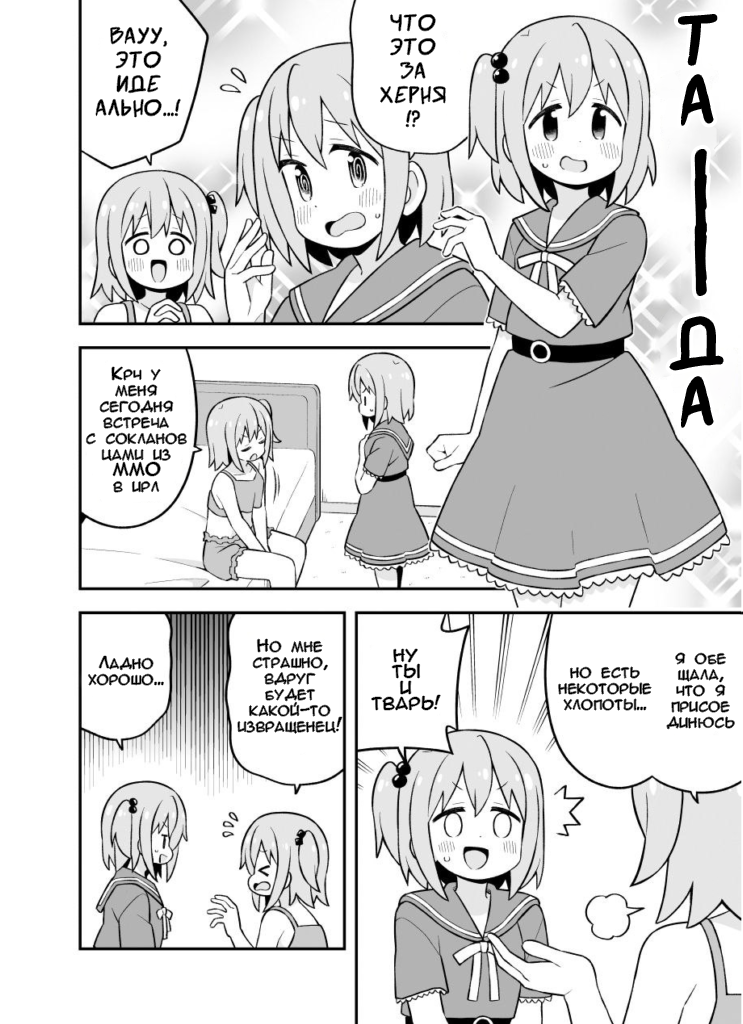
<style>
.page{position:relative;width:743px;height:1024px;background:#ffffff}
.page>*{position:absolute;margin:0}
.t1{font:24px/24px "SuperWebcomicBros.Rusbyyakustick";color:#000000}
.t2{font:72px/12px "AnimeAcev3";color:#000000}
.t3{font:72px/60px "SuperWebcomicBros.Rusbyyakustick";color:#000000}
.t4{font:14px/14px "AnimeAcev3";color:#000000}
.t5{font:24px/12px "AnimeAcev3";color:#000000}
.t6{font:16px/16px "AnimeAcev3";color:#000000}
</style>
<div class="page">
<p class="t1" style="left:380px;top:14px;width:66px;height:113px;text-align:center">Что<br>это<br>за<br>херня<br>!?</p>
<p class="t2" style="left:670px;top:15px;width:53px;height:412px;text-align:center"><span class="t3">Т<br>А<br><br></span><span class="t4"><br></span>|<br> <br>|<br> <br><br><br>|<br>|<span class="t5"><br><br></span><span class="t3">д<br>А</span></p>
<p class="t1" style="left:96px;top:27px;width:85px;height:90px;text-align:center">Вауу,<br>это<br>иде<br>ально...!</p>
<p class="t6" style="left:86px;top:367px;width:101px;height:126px;text-align:center">Крч у<br>меня<br>сегодня<br>встреча<br>с сокланов<br>цами из<br>MMO<br>в ирл</p>
<p class="t6" style="left:237px;top:639px;width:105px;height:95px;text-align:center">Но мне<br>страшно,<br>вдруг<br>будет<br>какой-то<br>извращенец!</p>
<p class="t6" style="left:371px;top:649px;width:70px;height:61px;text-align:center">НУ<br>ТЫ<br>И<br>ТВАРЬ!</p>
<p class="t6" style="left:666px;top:652px;width:69px;height:77px;text-align:center">я обе<br>щала,<br>что я<br>присое<br>динюсь</p>
<p class="t6" style="left:88px;top:656px;width:76px;height:30px;text-align:center">Ладно<br>хорошо...</p>
<p class="t6" style="left:558px;top:666px;width:94px;height:45px;text-align:center">но есть<br>некоторые<br>хлопоты...</p>
</div>
